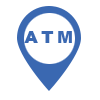
<style>
.page{position:relative;width:100px;height:100px;background:#ffffff}
.page>*{position:absolute;margin:0}
.t1{font:17.3px "Arial-Black";letter-spacing:0.185em;color:#3a68b1}
</style>
<div class="page">
<p class="t1" style="left:24px;top:31px;width:48px;height:12px">ATM</p>
</div>
